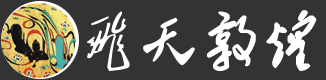
<style>
.page{position:relative;width:326px;height:80px;background:#333333}
.page>*{position:absolute;margin:0}
.t1{font:56.8px "²ÝÌ´Õ«Ã«Ôó¶«×ÖÌå";letter-spacing:0.08em;color:#ffffff}
</style>
<div class="page">
<p class="t1" style="left:87px;top:10px;width:230px;height:61px">飞天敦煌</p>
</div>
